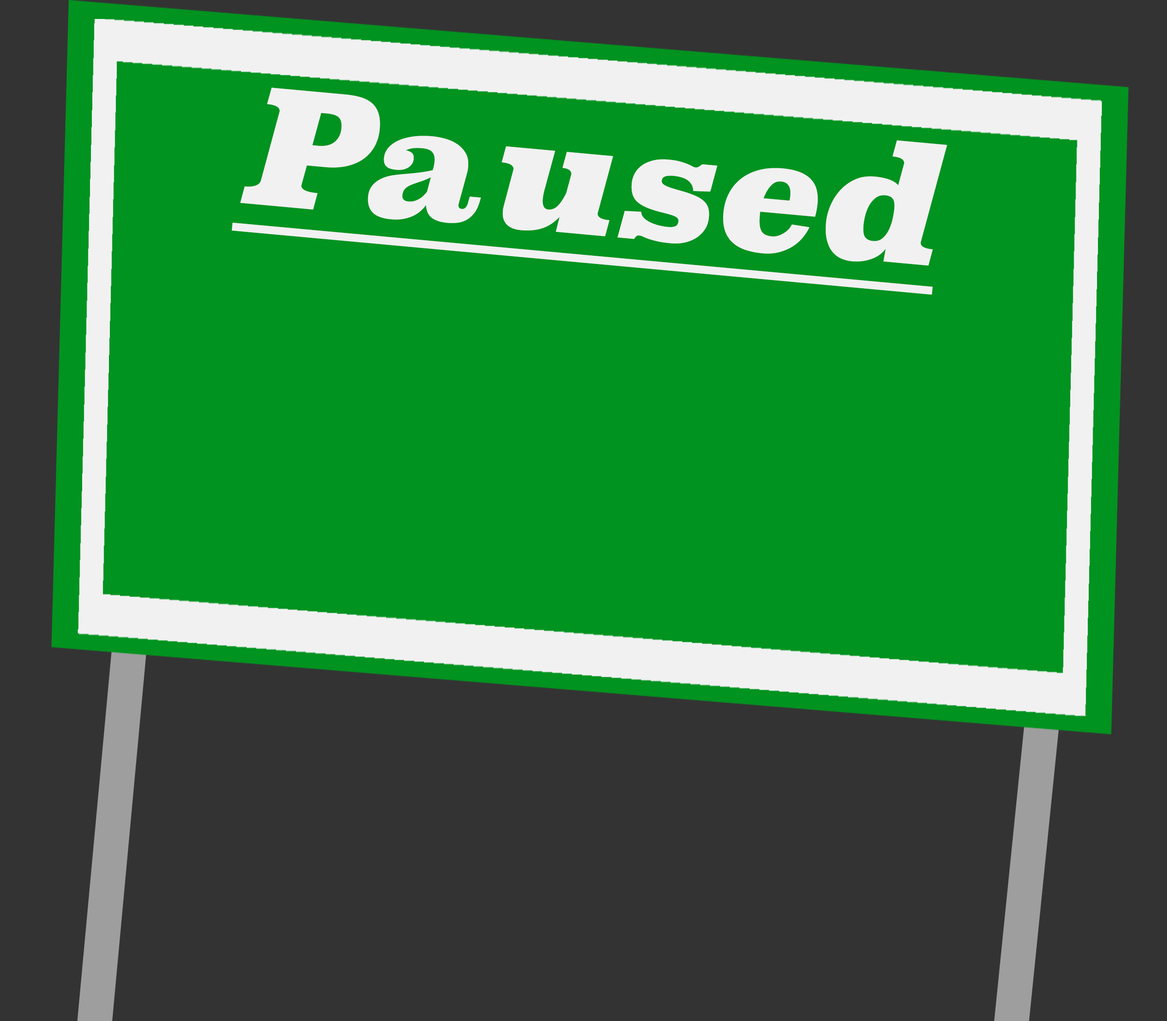
<style>
.page{position:relative;width:1167px;height:1021px;background:#00931f}
.page>*{position:absolute;margin:0}
.t1{font:158.1px "Superclarendon-BlackItalic";color:#f1f1f1;text-decoration:underline}
</style>
<div class="page">
<p class="t1" style="left:232px;top:88px;width:716px;height:207px;rotate:5deg">Paused</p>
</div>
